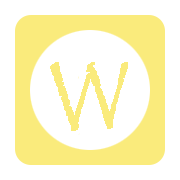
<style>
.page{position:relative;width:180px;height:180px;background:#ffffff}
.page>*{position:absolute;margin:0}
.t1{font:72px "Papyrus-Regular";letter-spacing:0.075em;color:#faeb7c;font-weight:bold;scale:1.06 1}
</style>
<div class="page">
<p class="t1" style="left:50px;top:62px;width:78px;height:69px">W</p>
</div>
